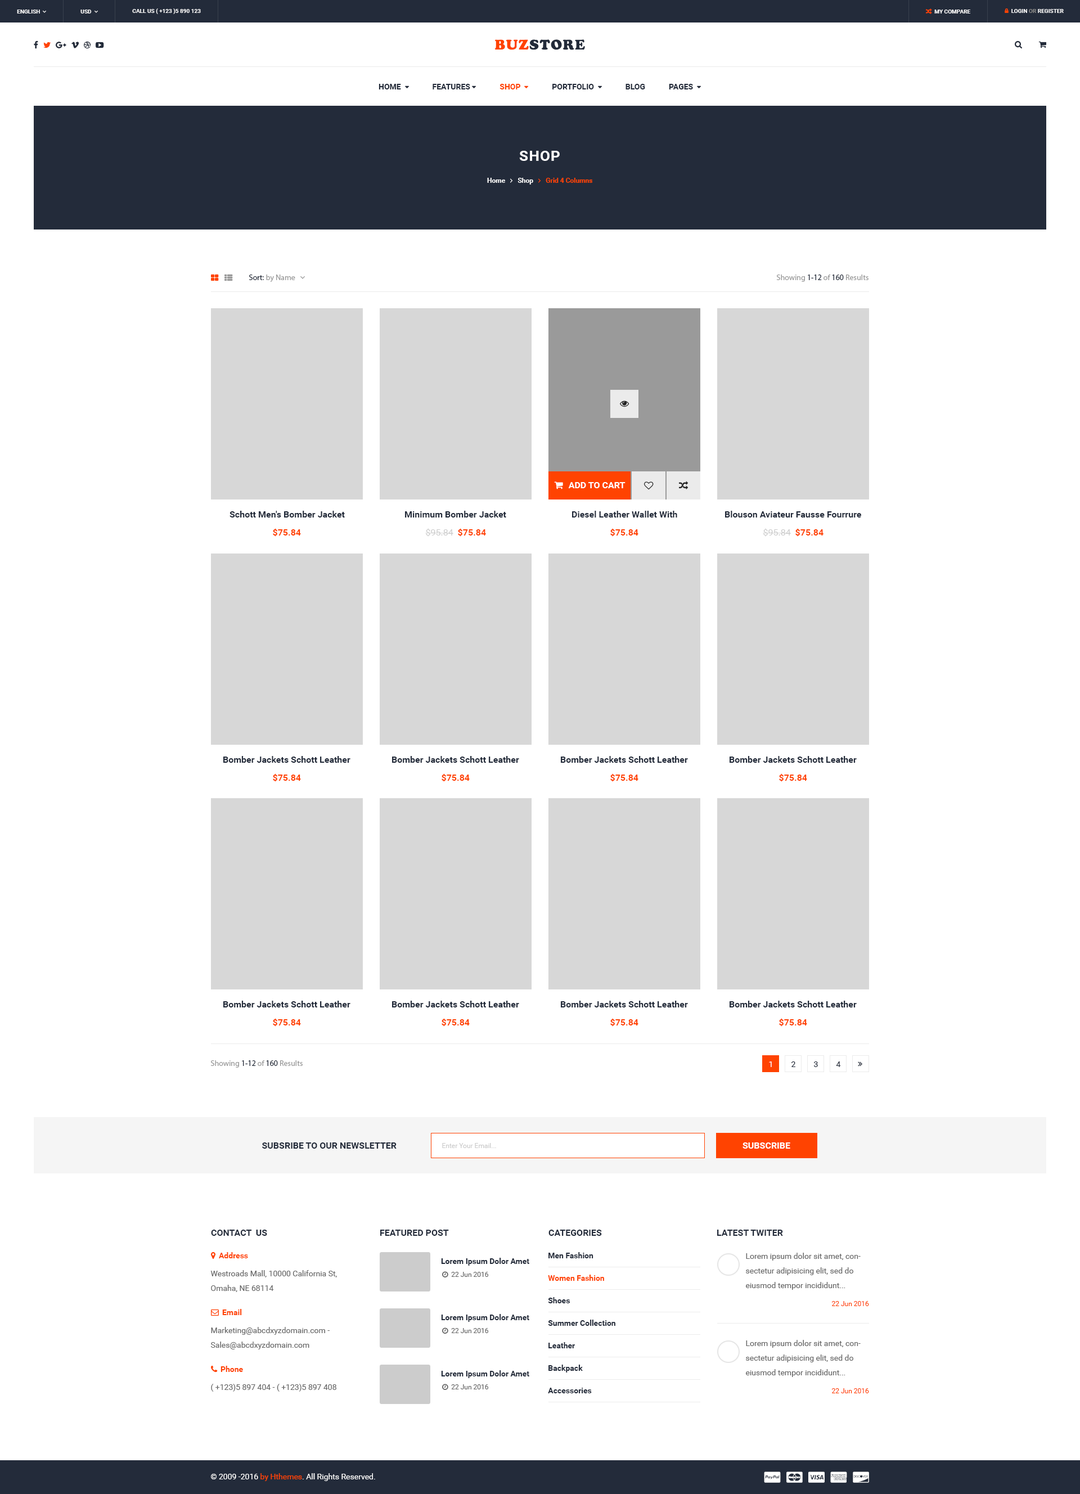
<style>
.page{position:relative;width:1080px;height:1494px;background:#ffffff}
.page>*{position:absolute;margin:0}
.t1{font:5.6px "Roboto-Bold";color:#ffffff;text-transform:uppercase}
.t2{font:14.6px "UTM-Cooper-Black";letter-spacing:0.05em;color:#232b3a;text-transform:uppercase}
.t3{font:14.6px "UTM-Cooper-Black";letter-spacing:0.05em;color:#ff4301;text-transform:uppercase}
.t4{font:14.6px "Roboto-Bold";letter-spacing:0.05em;color:#ffffff;text-transform:uppercase}
.t5{font:7.9px "MyriadPro-Regular";color:#999999}
.t6{font:7.9px "MyriadPro-Regular";color:#232b3a}
.t7{font:9px "Roboto-Bold";color:#232b3a}
.t8{font:9px "Roboto-Bold";color:#ff4301}
.t9{font:9px "Roboto-Regular";color:#cccccc}
.t10{font:7.9px "Roboto-Regular";color:#fefefe}
.t11{font:7.9px "Roboto-Regular";color:#232b3a}
.t12{font:9px "Roboto-Bold";color:#232b3a;text-transform:uppercase}
.t13{font:6.8px "Roboto-Regular";color:#cccccc}
.t14{font:9px "Roboto-Bold";color:#ffffff;text-transform:uppercase}
.t15{font:7.9px/22.5px "Roboto-Bold";color:#232b3a}
.t16{font:7.9px/22.5px "Roboto-Bold";color:#ff4301}
.t17{font:7.9px/14.6px "Roboto-Regular";color:#666666}
.t18{font:7.9px "Roboto-Bold";color:#232b3a}
.t19{font:6.8px "Roboto-Regular";color:#ff4301}
.t20{font:7.9px "Roboto-Regular";color:#666666}
.t21{font:7.9px "Roboto-Regular";color:#ffffff}
.t22{font:7.9px "Roboto-Regular";color:#ff4301}
</style>
<div class="page">
<p class="t1" style="left:132px;top:8px;width:69px;height:6px">call us ( +123 )5 890 123</p>
<p class="t2" style="left:494px;top:39px;width:91px;height:11px"><span class="t3">buz</span>store</p>
<p class="t4" style="left:519px;top:151px;width:41px;height:10px">SHop</p>
<p class="t5" style="left:776px;top:274px;width:92px;height:8px">Showing<span class="t6"> 1-12 </span>of<span class="t6"> 160 </span>Results</p>
<p class="t7" style="left:230px;top:511px;width:115px;height:7px">Schott Men's Bomber Jacket</p>
<p class="t7" style="left:405px;top:511px;width:101px;height:7px">Minimum Bomber Jacket</p>
<p class="t7" style="left:572px;top:511px;width:105px;height:7px">Diesel Leather Wallet With</p>
<p class="t7" style="left:725px;top:511px;width:136px;height:7px">Blouson Aviateur Fausse Fourrure</p>
<p class="t8" style="left:273px;top:528px;width:28px;height:9px">$75.84</p>
<p class="t9" style="left:425px;top:528px;width:61px;height:9px">$95.84  <span class="t8">$75.84</span></p>
<p class="t8" style="left:610px;top:528px;width:28px;height:9px">$75.84</p>
<p class="t9" style="left:763px;top:528px;width:61px;height:9px">$95.84  <span class="t8">$75.84</span></p>
<p class="t7" style="left:223px;top:756px;width:127px;height:7px">Bomber Jackets Schott Leather</p>
<p class="t7" style="left:392px;top:756px;width:127px;height:7px">Bomber Jackets Schott Leather</p>
<p class="t7" style="left:561px;top:756px;width:127px;height:7px">Bomber Jackets Schott Leather</p>
<p class="t7" style="left:730px;top:756px;width:127px;height:7px">Bomber Jackets Schott Leather</p>
<p class="t8" style="left:273px;top:773px;width:28px;height:9px">$75.84</p>
<p class="t8" style="left:442px;top:773px;width:28px;height:9px">$75.84</p>
<p class="t8" style="left:610px;top:773px;width:28px;height:9px">$75.84</p>
<p class="t8" style="left:779px;top:773px;width:28px;height:9px">$75.84</p>
<p class="t7" style="left:223px;top:1001px;width:127px;height:6px">Bomber Jackets Schott Leather</p>
<p class="t7" style="left:392px;top:1001px;width:127px;height:6px">Bomber Jackets Schott Leather</p>
<p class="t7" style="left:561px;top:1001px;width:127px;height:6px">Bomber Jackets Schott Leather</p>
<p class="t7" style="left:730px;top:1001px;width:127px;height:6px">Bomber Jackets Schott Leather</p>
<p class="t8" style="left:273px;top:1018px;width:28px;height:9px">$75.84</p>
<p class="t8" style="left:442px;top:1018px;width:28px;height:9px">$75.84</p>
<p class="t8" style="left:610px;top:1018px;width:28px;height:9px">$75.84</p>
<p class="t8" style="left:779px;top:1018px;width:28px;height:9px">$75.84</p>
<p class="t5" style="left:210px;top:1060px;width:93px;height:8px">Showing<span class="t6"> 1-12 </span>of<span class="t6"> 160 </span>Results</p>
<p class="t10" style="left:769px;top:1061px;width:3px;height:6px">1</p>
<p class="t11" style="left:791px;top:1061px;width:4px;height:6px">2</p>
<p class="t11" style="left:814px;top:1061px;width:4px;height:6px">3</p>
<p class="t11" style="left:836px;top:1061px;width:5px;height:6px">4</p>
<p class="t12" style="left:262px;top:1142px;width:135px;height:7px">Subsribe to our newsletter</p>
<p class="t13" style="left:442px;top:1143px;width:54px;height:5px">Enter Your Email...</p>
<p class="t14" style="left:742px;top:1142px;width:48px;height:7px">Subscribe</p>
<p class="t12" style="left:211px;top:1230px;width:56px;height:6px">contact  us</p>
<p class="t12" style="left:380px;top:1230px;width:69px;height:6px">featured post</p>
<p class="t12" style="left:548px;top:1230px;width:54px;height:6px">categories</p>
<p class="t12" style="left:717px;top:1230px;width:66px;height:6px">latest twiter</p>
<p class="t15" style="left:548px;top:1252px;width:67px;height:141px">Men Fashion<br><span class="t16">Women Fashion<br></span>Shoes<br>Summer Collection<br>Leather<br>Backpack<br>Accessories</p>
<p class="t17" style="left:746px;top:1253px;width:115px;height:37px">Lorem ipsum dolor sit amet, consectetur adipisicing elit, sed do eiusmod tempor incididunt...</p>
<p class="t18" style="left:441px;top:1258px;width:88px;height:8px">Lorem Ipsum Dolor Amet</p>
<p class="t17" style="left:210px;top:1270px;width:127px;height:22px">Westroads Mall, 10000 California St, Omaha, NE 68114</p>
<p class="t19" style="left:831px;top:1301px;width:38px;height:5px">22 Jun 2016</p>
<p class="t18" style="left:441px;top:1314px;width:88px;height:8px">Lorem Ipsum Dolor Amet</p>
<p class="t17" style="left:210px;top:1327px;width:120px;height:22px">Marketing@abcdxyzdomain.com - <br>Sales@abcdxyzdomain.com</p>
<p class="t17" style="left:746px;top:1340px;width:115px;height:37px">Lorem ipsum dolor sit amet, consectetur adipisicing elit, sed do eiusmod tempor incididunt...</p>
<p class="t18" style="left:441px;top:1370px;width:88px;height:8px">Lorem Ipsum Dolor Amet</p>
<p class="t20" style="left:211px;top:1384px;width:125px;height:8px">( +123)5 897 404 - ( +123)5 897 408</p>
<p class="t19" style="left:831px;top:1388px;width:38px;height:5px">22 Jun 2016</p>
<p class="t21" style="left:211px;top:1473px;width:164px;height:8px">© 2009 -2016 <span class="t22">by Hthemes</span>. All Rights Reserved.</p>
</div>
